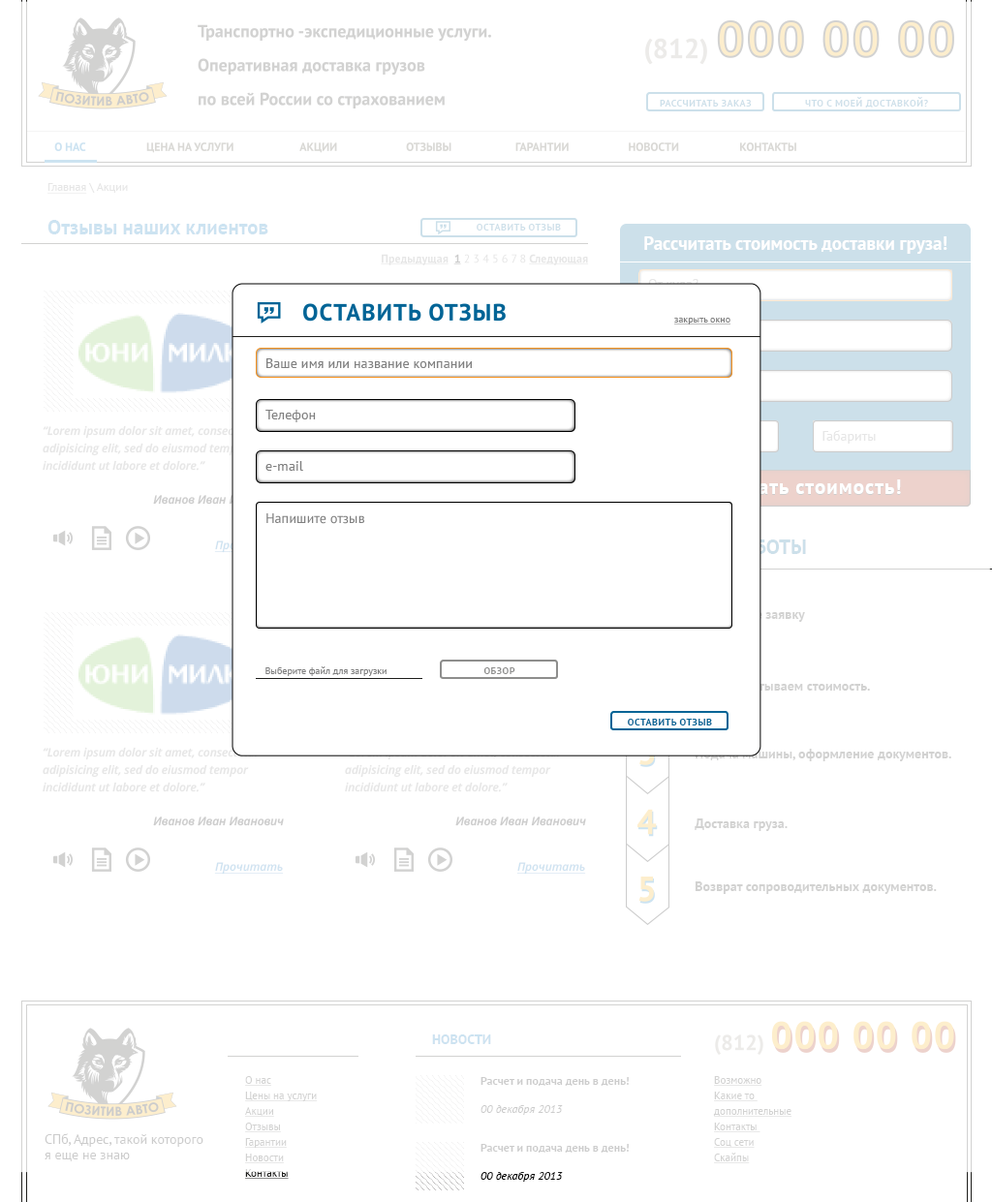
<style>
.page{position:relative;width:992px;height:1202px;background:#ffffff}
.page>*{position:absolute;margin:0}
.t1{font:9.7px "PTSans-Bold";letter-spacing:0.05em;color:#cce0ea}
.t2{font:11.6px "PTSans-Regular";color:#e6e6e6;text-decoration:underline}
.t3{font:11.6px "PTSans-Regular";color:#e6e6e6}
.t4{font:20.3px "PTSans-Bold";color:#cce3f1}
.t5{font:18.4px "PTSans-Bold";color:#ffffff}
.t6{font:9.7px "PTSans-Regular";color:#808080;text-decoration:underline}
.t7{font:13.8px "PTSans-Regular";color:#808080}
.t8{font:13.6px "PTSans-Regular";color:#e6e6e6}
.t9{font:20.3px "PTSans-Bold";letter-spacing:0.05em;color:#ffffff}
.t10{font:9.7px "PTSans-Regular";color:#808080}
.t11{font:9.7px "PTSans-Bold";letter-spacing:0.05em;color:#8e8e8d}
.t12{font:13.6px "PTSans-Bold"}
.t13{font:9.7px "PTSans-Bold";letter-spacing:0.05em;color:#006496}
.t14{font:11.6px/17.4px "OpenSans-SemiboldItalic";color:#e6e6e6}
.t15{font:11.6px/17.4px "OpenSans-SemiboldItalic"}
.t16{font:13.6px "PTSans-Bold";color:#d2d2d1}
.t17{font:11.6px "OpenSans-SemiboldItalic";color:#cce3f1;text-decoration:underline}
.t18{font:13.6px "PTSans-Bold";color:#cce3f1}
.t19{font:10.7px/15.5px "PTSans-Regular";color:#d2d2d1;text-decoration:underline}
.t20{font:11.6px "PTSans-Bold";color:#cccccc}
.t21{font:11.6px "PTSans-Italic";color:#cccccc}
.t22{font:13.6px "PTSans-Regular";color:#cccccc}
</style>
<div class="page">
<p class="t1" style="left:660px;top:100px;width:92px;height:7px">РАССЧИТАТЬ ЗАКАЗ</p>
<p class="t1" style="left:660px;top:100px;width:92px;height:7px">РАССЧИТАТЬ ЗАКАЗ</p>
<p class="t1" style="left:805px;top:97px;width:123px;height:11px">ЧТО С МОЕЙ ДОСТАВКОЙ?</p>
<p class="t1" style="left:805px;top:97px;width:123px;height:11px">ЧТО С МОЕЙ ДОСТАВКОЙ?</p>
<p class="t2" style="left:47px;top:183px;width:81px;height:11px">Главная<span class="t3"> \ Акции</span></p>
<p class="t4" style="left:47px;top:220px;width:221px;height:14px">Отзывы наших клиентов</p>
<p class="t1" style="left:477px;top:224px;width:84px;height:7px">ОСТАВИТЬ ОТЗЫВ</p>
<p class="t1" style="left:477px;top:224px;width:84px;height:7px">ОСТАВИТЬ ОТЗЫВ</p>
<p class="t5" style="left:644px;top:236px;width:303px;height:18px">Рассчитать стоимость доставки груза!</p>
<p class="t6" style="left:674px;top:318px;width:57px;height:7px">закрыть окно</p>
<p class="t7" style="left:266px;top:358px;width:206px;height:10px">Ваше имя или название компании</p>
<p class="t7" style="left:265px;top:410px;width:51px;height:12px">Телефон</p>
<p class="t8" style="left:822px;top:430px;width:54px;height:14px">Габариты</p>
<p class="t7" style="left:265px;top:461px;width:38px;height:10px">e-mail</p>
<p class="t9" style="left:684px;top:480px;width:217px;height:15px">Рассчитать стоимость!</p>
<p class="t9" style="left:684px;top:479px;width:217px;height:15px">Рассчитать стоимость!</p>
<p class="t10" style="left:265px;top:666px;width:122px;height:10px">Выберите файл для загрузки</p>
<p class="t11" style="left:483px;top:667px;width:32px;height:7px">ОБЗОР</p>
<p class="t11" style="left:483px;top:667px;width:32px;height:7px">ОБЗОР</p>
<p class="t12" style="left:696px;top:681px;width:174px;height:13px">Мы рассчитываем стоимость.</p>
<p class="t13" style="left:628px;top:719px;width:84px;height:7px">ОСТАВИТЬ ОТЗЫВ</p>
<p class="t13" style="left:628px;top:719px;width:84px;height:7px">ОСТАВИТЬ ОТЗЫВ</p>
<p class="t14" style="left:43px;top:747px;width:241px;height:79px">“Lorem ipsum dolor sit amet, consectetur adipisicing elit, sed do eiusmod tempor incididunt ut labore et dolore.”<br><br>Иванов Иван Иванович</p>
<p class="t15" style="left:345px;top:747px;width:241px;height:79px">“Lorem ipsum dolor sit amet, consectetur adipisicing elit, sed do eiusmod tempor incididunt ut labore et dolore.”<br><br>Иванов Иван Иванович</p>
<p class="t16" style="left:695px;top:749px;width:256px;height:12px">Подача машины, оформление документов.</p>
<p class="t16" style="left:695px;top:819px;width:93px;height:12px">Доставка груза.</p>
<p class="t17" style="left:214px;top:862px;width:70px;height:13px">Прочитать</p>
<p class="t17" style="left:516px;top:862px;width:70px;height:13px">Прочитать</p>
<p class="t16" style="left:695px;top:882px;width:242px;height:12px">Возврат сопроводительных документов.</p>
<p class="t18" style="left:432px;top:1035px;width:59px;height:9px">НОВОСТИ</p>
<p class="t19" style="left:245px;top:1076px;width:73px;height:103px">О нас<br>Цены на услуги<br>Акции<br>Отзывы<br>Гарантии<br>Новости<br>Контакты</p>
<p class="t20" style="left:480px;top:1077px;width:149px;height:38px">Расчет и подача день в день!<br><br><span class="t21">00 декабря 2013</span></p>
<p class="t19" style="left:713px;top:1076px;width:79px;height:87px">Возможно<br>Какие то <br>дополнительные<br>Контакты <br>Соц сети<br>Скайпы</p>
<p class="t22" style="left:45px;top:1133px;width:158px;height:28px">СПб, Адрес, такой которого<br>я еще не знаю</p>
<p class="t20" style="left:480px;top:1144px;width:149px;height:38px">Расчет и подача день в день!<br><br><span class="t21">00 декабря 2013</span></p>
</div>
